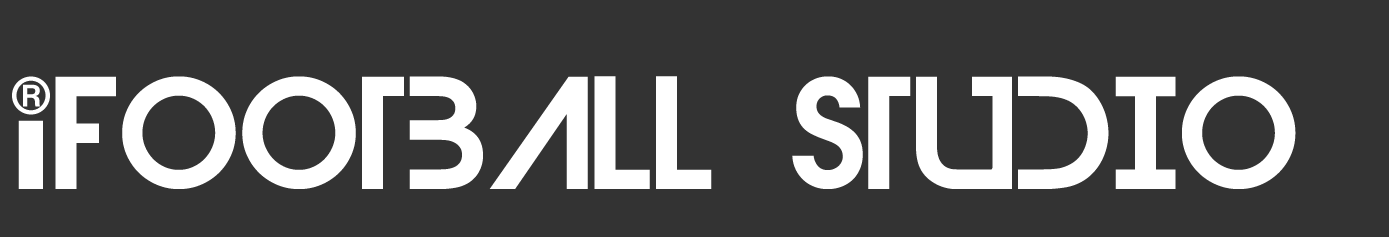
<style>
.page{position:relative;width:1389px;height:237px;background:#333333}
.page>*{position:absolute;margin:0}
.t1{font:50px "DevilBreezeDemi";color:#ffffff}
.t2{font:150px "DevilBreezeDemi";color:#ffffff}
.t3{font:90.6px "DevilBreezeBold";color:#ffffff;scale:1.38 1}
</style>
<div class="page">
<p class="t1" style="left:12px;top:76px;width:38px;height:39px">®</p>
<p class="t2" style="left:55px;top:76px;width:1241px;height:113px">FOOTBALL STUDIO</p>
<p class="t3" style="left:18px;top:120px;width:25px;height:69px">i</p>
</div>
